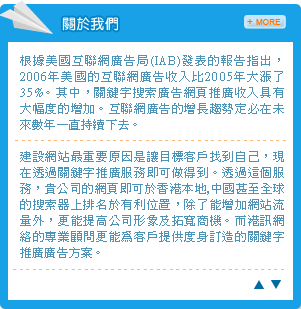
<style>
.page{position:relative;width:301px;height:309px;background:#ffffff}
.page>*{position:absolute;margin:0}
.t1{font:14px "DFYuan-Md-HK-BF";letter-spacing:0.02em;color:#ffffff}
.t2{font:12px/16px "PMingLiU";letter-spacing:0.02em;color:#4d93b7}
.t3{font:6px "DFYuan-Md-HK-BF";letter-spacing:0.05em;color:#ffb777}
</style>
<div class="page">
<p class="t1" style="left:62px;top:17px;width:56px;height:14px">關於我們</p>
<p class="t2" style="left:20px;top:55px;width:264px;height:203px;text-align:justify">根據美國互聯網廣告局(IAB)發表的報告指出，2006年美國的互聯網廣告收入比2005年大漲了35%。其中，關鍵字搜索廣告網頁推廣收入具有大幅度的增加。互聯網廣告的增長趨勢定必在未來數年一直持續下去。<br><br>建設網站最重要原因是讓目標客戶找到自己，現在透過關鍵字推廣服務即可做得到。透過這個服務，貴公司的網頁即可於香港本地,中國甚至全球的搜索器上排名於有利位置，除了能增加網站流量外，更能提高公司形象及拓寬商機。而港訊網絡的專業顧問更能為客戶提供度身訂造的關鍵字推廣廣告方案。</p>
<p class="t3" style="left:15px;top:140px;width:271px;height:1px">_ _ _ _ _ _ _ _ _ _ _ _ _ _ _ _ _ _ _ _ _ _ _ _ _ _ _ _ _ _ _ _ _ _ _ _ _ _ _ _ _ _ _ _</p>
<p class="t3" style="left:13px;top:269px;width:271px;height:1px">_ _ _ _ _ _ _ _ _ _ _ _ _ _ _ _ _ _ _ _ _ _ _ _ _ _ _ _ _ _ _ _ _ _ _ _ _ _ _ _ _ _ _ _</p>
</div>
